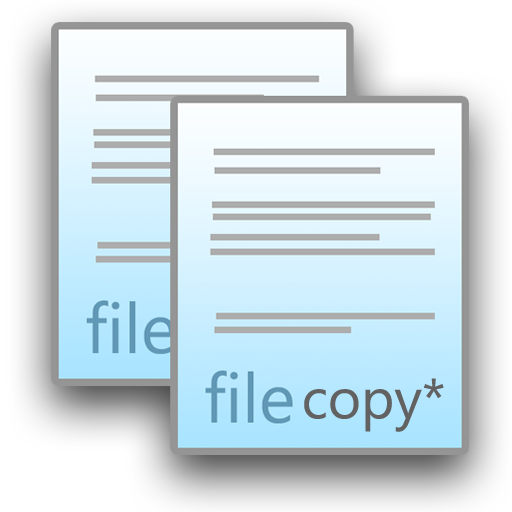
<style>
.page{position:relative;width:512px;height:512px}
.page>*{position:absolute;margin:0}
.t1{font:56.7px "SegoeUI";color:#626262}
</style>
<div class="page">
<p class="t1" style="left:304px;top:378px;width:140px;height:54px">copy*</p>
</div>
